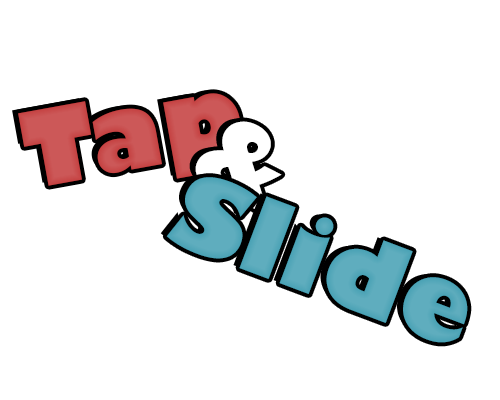
<style>
.page{position:relative;width:500px;height:400px;background:#ffffff}
.page>*{position:absolute;margin:0}
.t1{font:102.8px "GillSans-UltraBold";color:#cb5656}
.t2{font:100px "GillSans-UltraBold";color:#ffffff}
.t3{font:102.8px "GillSans-UltraBold";color:#5babbc}
</style>
<div class="page">
<p class="t1" style="left:18px;top:93px;width:223px;height:93px;rotate:-10deg">Tap</p>
<p class="t2" style="left:195px;top:121px;width:87px;height:96px;rotate:27deg">&amp;</p>
<p class="t3" style="left:166px;top:177px;width:302px;height:166px;rotate:21deg">Slide</p>
</div>
